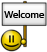
<style>
.page{position:relative;width:47px;height:52px;background:#ffffff}
.page>*{position:absolute;margin:0}
.t1{font:10px "Tahoma";color:#000000}
</style>
<div class="page">
<p class="t1" style="left:4px;top:10px;width:41px;height:8px">Welcome</p>
</div>
